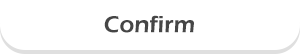
<style>
.page{position:relative;width:300px;height:54px;background:#ffffff}
.page>*{position:absolute;margin:0}
.t1{font:24px "ErasITC-Demi";color:#464646}
</style>
<div class="page">
<p class="t1" style="left:104px;top:15px;width:90px;height:18px">Confirm</p>
</div>
